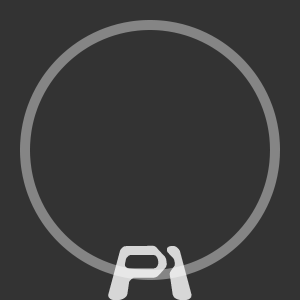
<style>
.page{position:relative;width:300px;height:300px;background:#333333}
.page>*{position:absolute;margin:0}
.t1{font:80px "ChintzyCPUBRK";color:#d7d7d7}
</style>
<div class="page">
<p class="t1" style="left:108px;top:245px;width:84px;height:56px">P1</p>
</div>
